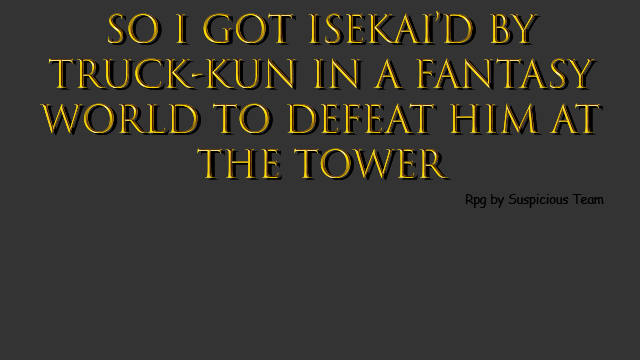
<style>
.page{position:relative;width:640px;height:360px;background:#333333}
.page>*{position:absolute;margin:0}
.t1{font:37.5px "TrajanColor-Concept"}
.t2{font:37.5px "TrajanColor-Concept";color:#000000}
.t3{font:12.5px "ComicSansMS";color:#000000}
</style>
<div class="page">
<p class="t1" style="left:40px;top:11px;width:560px;height:168px;text-align:center">So i got isekai’d by Truck-kun in a fantasy world to defeat him at the tower</p>
<p class="t2" style="left:43px;top:13px;width:560px;height:168px;text-align:center">So i got isekai’d by truck-kun in a fantasy world to defeat him at the tower</p>
<p class="t3" style="left:465px;top:194px;width:139px;height:14px">Rpg by Suspicious Team</p>
</div>
